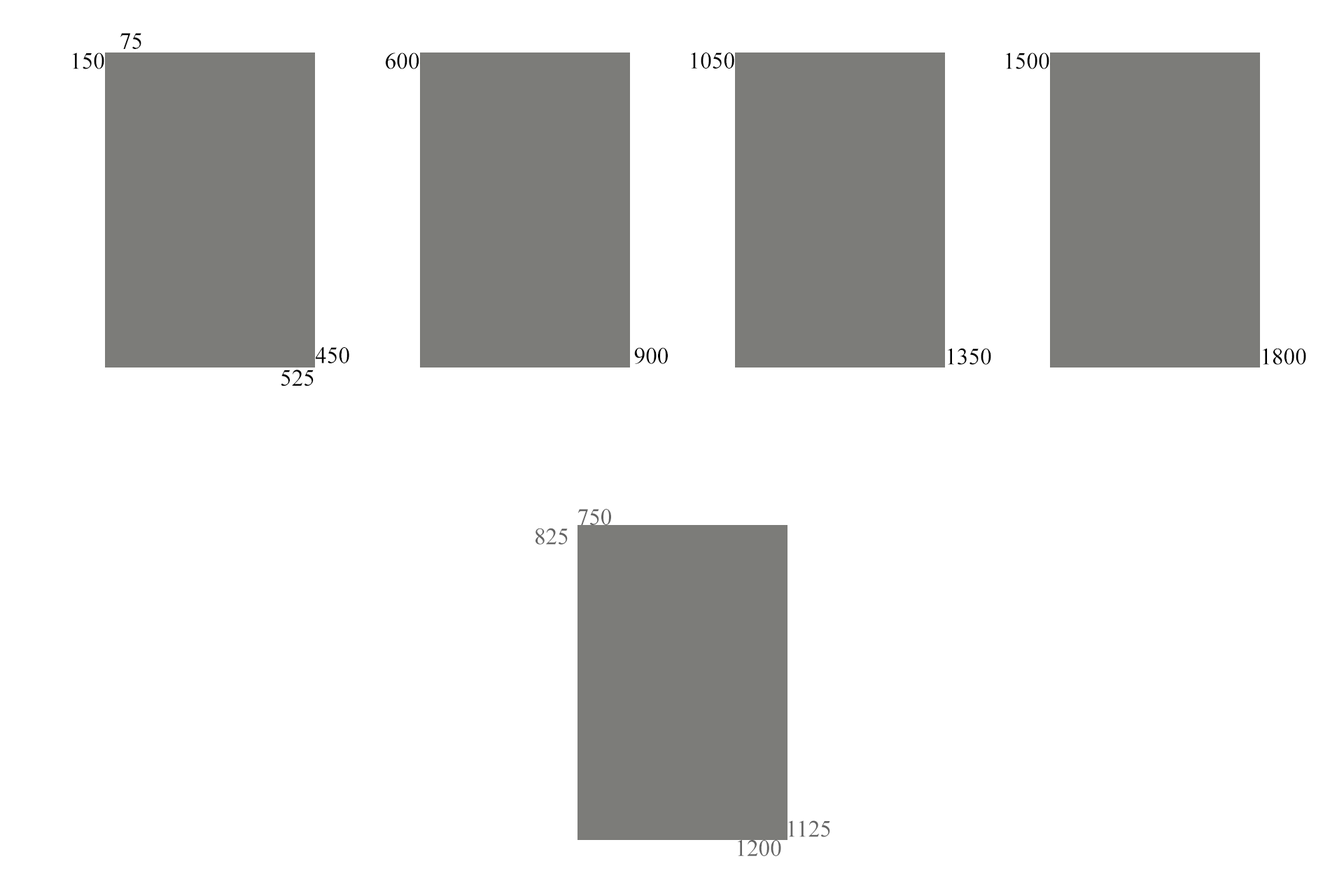
<style>
.page{position:relative;width:1330px;height:896px;background:#ffffff}
.page>*{position:absolute;margin:0}
.t1{font:23.3px "TimesNewRomanPSMT";color:#000000}
.t2{font:23.3px "TimesNewRomanPSMT";color:#646464}
</style>
<div class="page">
<p class="t1" style="left:120px;top:33px;width:21px;height:16px">75</p>
<p class="t1" style="left:72px;top:53px;width:32px;height:16px">150</p>
<p class="t1" style="left:386px;top:53px;width:33px;height:16px">600</p>
<p class="t1" style="left:691px;top:53px;width:44px;height:16px">1050</p>
<p class="t1" style="left:1006px;top:53px;width:44px;height:16px">1500</p>
<p class="t1" style="left:316px;top:347px;width:33px;height:16px">450</p>
<p class="t1" style="left:634px;top:347px;width:34px;height:17px">900</p>
<p class="t1" style="left:948px;top:348px;width:44px;height:17px">1350</p>
<p class="t1" style="left:1263px;top:348px;width:44px;height:17px">1800</p>
<p class="t1" style="left:281px;top:370px;width:33px;height:17px">525</p>
<p class="t2" style="left:578px;top:509px;width:33px;height:16px">750</p>
<p class="t2" style="left:536px;top:528px;width:32px;height:17px">825</p>
<p class="t2" style="left:788px;top:821px;width:42px;height:16px">1125</p>
<p class="t2" style="left:738px;top:840px;width:43px;height:16px">1200</p>
</div>
